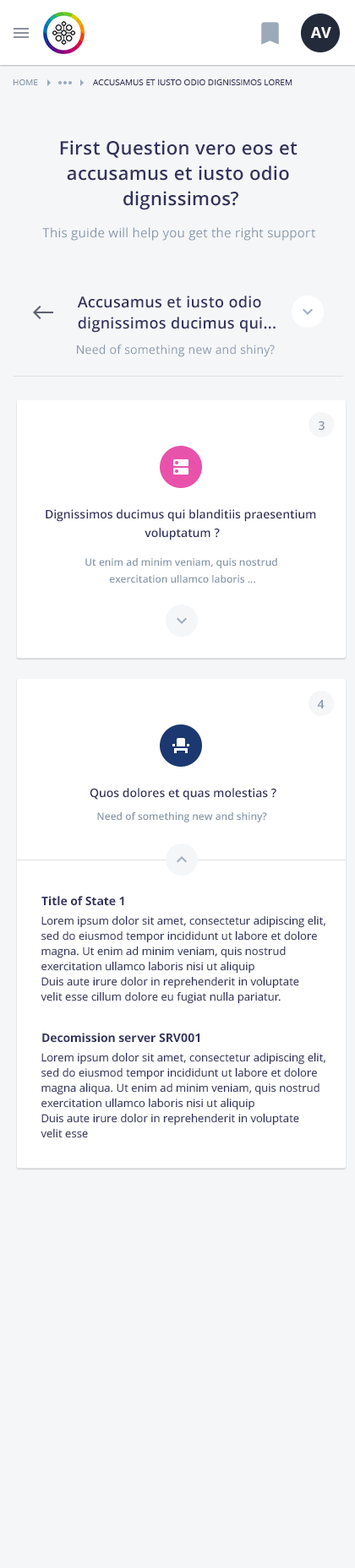
<style>
.page{position:relative;width:355px;height:1568px;background:#f5f6f8}
.page>*{position:absolute;margin:0}
.t1{font:15.2px "OpenSans-Bold";color:#ffffff;text-transform:uppercase}
.t2{font:8.4px "OpenSans";color:#8898aa;text-transform:uppercase}
.t3{font:8.4px "OpenSans";color:#32325d;text-transform:uppercase}
.t4{font:18.6px/25.3px "OpenSans-Semibold";letter-spacing:0.02em;color:#32325d}
.t5{font:12.7px "OpenSans";letter-spacing:0.02em;color:#8898aa}
.t6{font:15.2px/21.1px "OpenSans-Semibold";letter-spacing:0.02em;color:#32325d}
.t7{font:11.8px "OpenSans";letter-spacing:0.02em;color:#8898aa}
.t8{font:11.8px "OpenSans-Semibold";color:#8898aa}
.t9{font:11.8px/18.6px "OpenSans-Semibold";color:#32325d}
.t10{font:10.1px/16.9px "OpenSans-Semibold";color:#8898aa}
.t11{font:11.8px "OpenSans-Semibold";color:#32325d}
.t12{font:10.1px "OpenSans-Semibold";color:#8898aa}
.t13{font:11.8px "OpenSans-Bold";color:#32325d}
.t14{font:11px/15.2px "OpenSans";letter-spacing:0.005em;color:#32325d}
</style>
<div class="page">
<p class="t1" style="left:310px;top:27px;width:21px;height:11px">AV</p>
<p class="t2" style="left:13px;top:79px;width:25px;height:6px">Home</p>
<p class="t3" style="left:93px;top:79px;width:199px;height:6px">Accusamus et iusto odio dignissimos lorem</p>
<p class="t4" style="left:60px;top:140px;width:237px;height:70px;text-align:center">First Question vero eos et <br>accusamus et iusto odio <br>dignissimos?</p>
<p class="t5" style="left:42px;top:227px;width:273px;height:14px">This guide will help you get the right support</p>
<p class="t6" style="left:77px;top:296px;width:198px;height:37px">Accusamus et iusto odio <br>dignissimos ducimus qui...</p>
<p class="t7" style="left:77px;top:345px;width:197px;height:12px">Need of something new and shiny?</p>
<p class="t8" style="left:318px;top:420px;width:6px;height:11px">3</p>
<p class="t9" style="left:46px;top:509px;width:270px;height:31px;text-align:center">Dignissimos ducimus qui blanditiis praesentium <br>voluptatum ?</p>
<p class="t10" style="left:85px;top:558px;width:192px;height:25px;text-align:center">Ut enim ad minim veniam, quis nostrud <br>exercitation ullamco laboris ...</p>
<p class="t8" style="left:317px;top:700px;width:7px;height:8px">4</p>
<p class="t11" style="left:90px;top:788px;width:186px;height:12px">Quos dolores et quas molestias ?</p>
<p class="t12" style="left:97px;top:811px;width:170px;height:11px">Need of something new and shiny?</p>
<p class="t13" style="left:41px;top:896px;width:83px;height:10px">Title of State 1</p>
<p class="t14" style="left:41px;top:915px;width:284px;height:89px">Lorem ipsum dolor sit amet, consectetur adipiscing elit, <br>sed do eiusmod tempor incididunt ut labore et dolore<br>magna. Ut enim ad minim veniam, quis nostrud <br>exercitation ullamco laboris nisi ut aliquip <br>Duis aute irure dolor in reprehenderit in voluptate <br>velit esse cillum dolore eu fugiat nulla pariatur.</p>
<p class="t13" style="left:42px;top:1033px;width:157px;height:10px">Decomission server SRV001</p>
<p class="t14" style="left:41px;top:1052px;width:284px;height:86px">Lorem ipsum dolor sit amet, consectetur adipiscing elit, <br>sed do eiusmod tempor incididunt ut labore et dolore <br>magna aliqua. Ut enim ad minim veniam, quis nostrud <br>exercitation ullamco laboris nisi ut aliquip <br>Duis aute irure dolor in reprehenderit in voluptate<br>velit esse</p>
</div>
